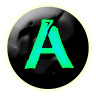
<style>
.page{position:relative;width:96px;height:96px;background:#ffffff}
.page>*{position:absolute;margin:0}
.t1{font:63px "KeltCapsFreehand"}
</style>
<div class="page">
<p class="t1" style="left:24px;top:19px;width:51px;height:50px">A</p>
</div>
